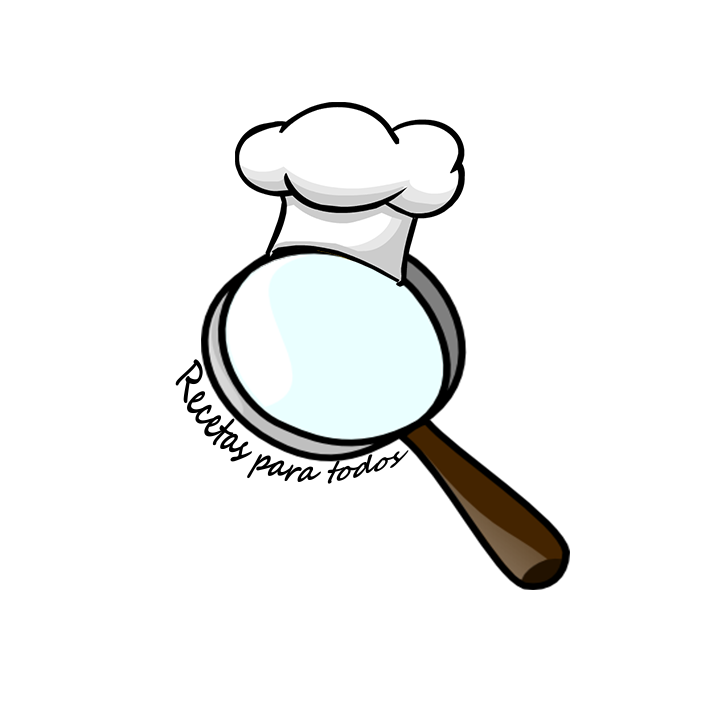
<style>
.page{position:relative;width:708px;height:708px;background:#ffffff}
.page>*{position:absolute;margin:0}
.t1{font:37.7px "SegoeScript-Bold";color:#000000;scale:0.6 1}
</style>
<div class="page">
<p class="t1" style="left:175px;top:359px;width:234px;height:125px;rotate:20deg">Recetas para todos</p>
</div>
